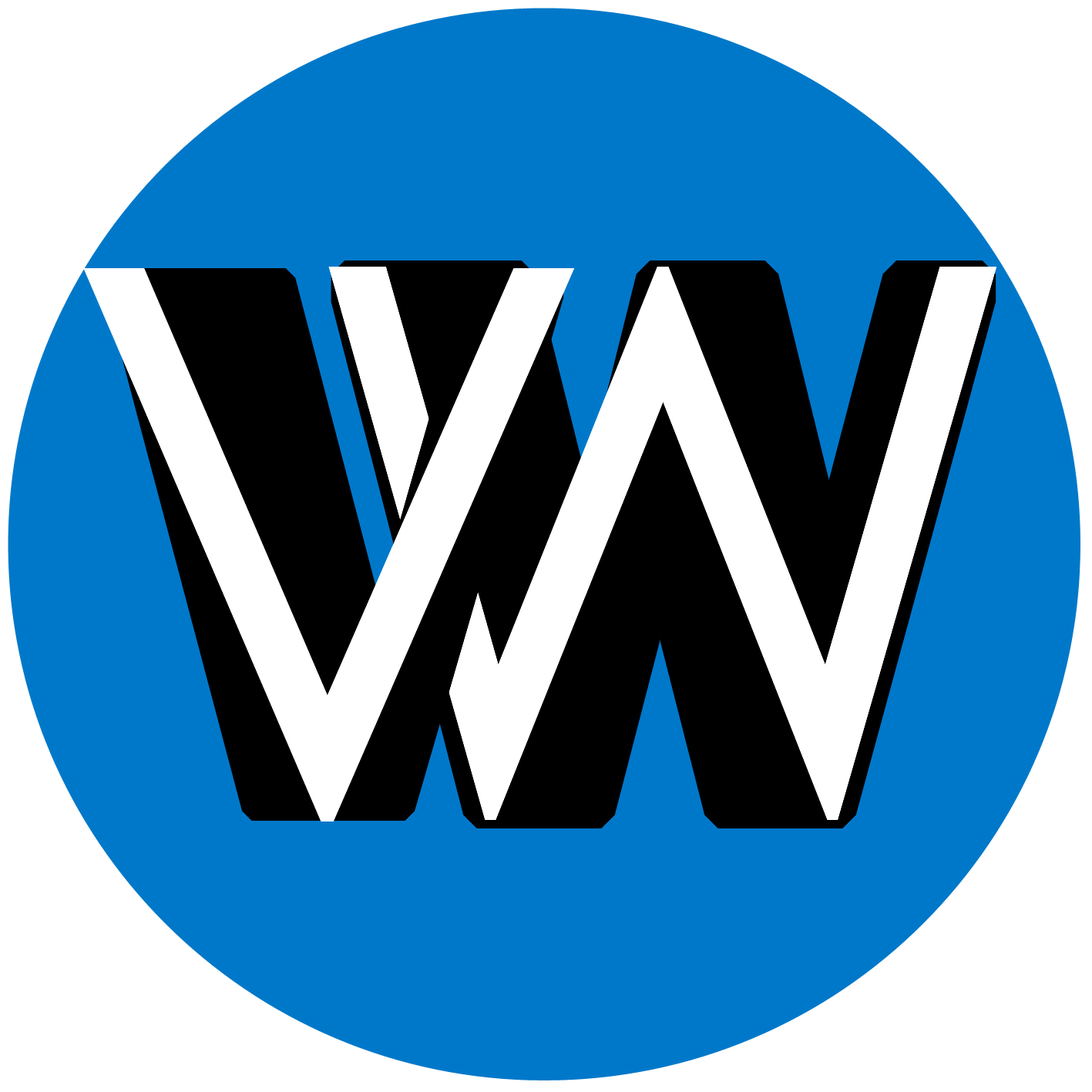
<style>
.page{position:relative;width:1092px;height:1092px;background:#0078c9}
.page>*{position:absolute;margin:0}
.t1{font:770.6px "CenturyGothic";color:#ffffff}
</style>
<div class="page">
<p class="t1" style="left:83px;top:268px;width:491px;height:553px">V</p>
<p class="t1" style="left:328px;top:267px;width:668px;height:553px">W</p>
</div>
